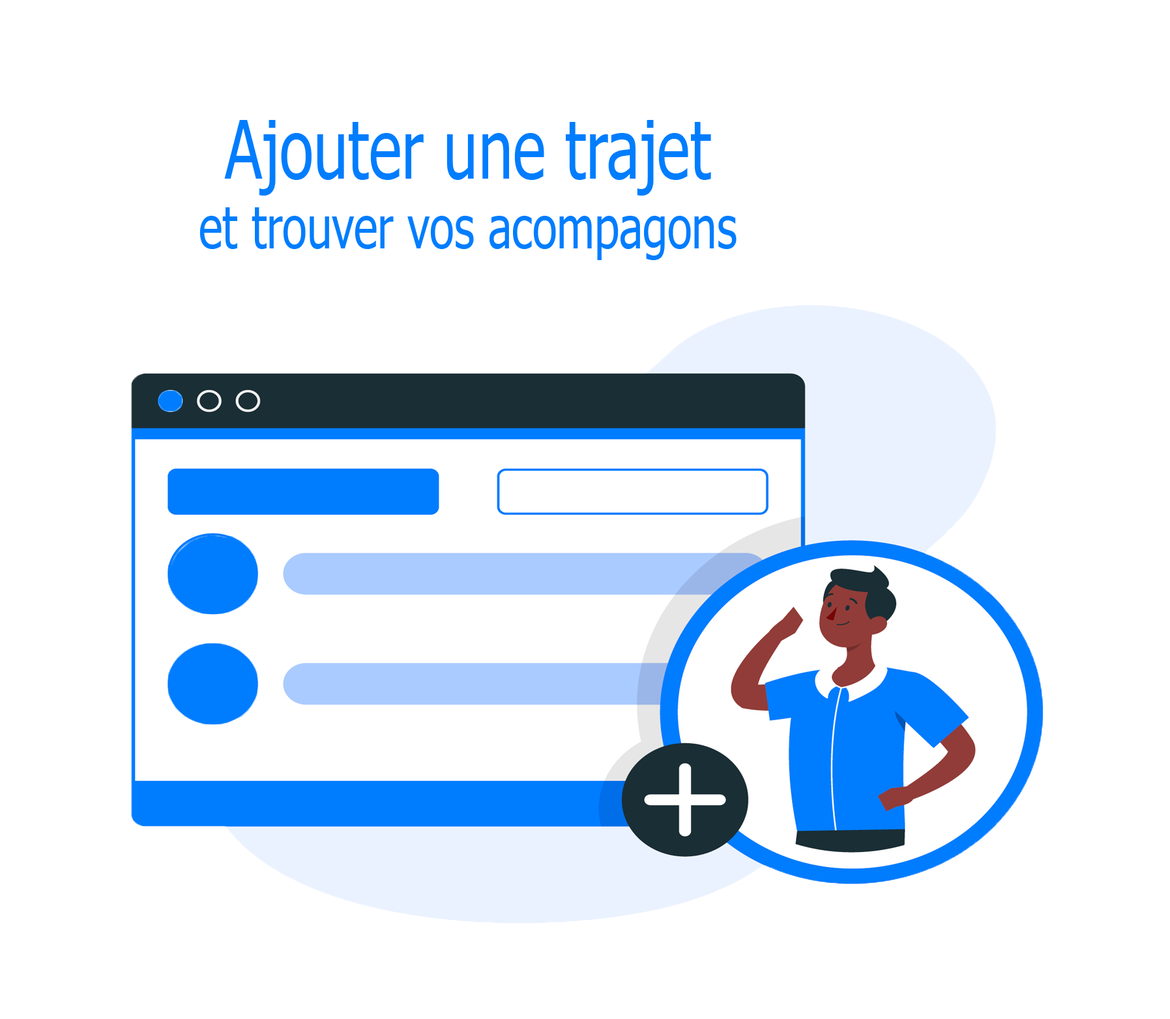
<style>
.page{position:relative;width:1170px;height:1019px;background:#ffffff}
.page>*{position:absolute;margin:0}
.t1{font:58.2px "Tahoma";color:#007dfe;scale:0.77 1}
.t2{font:80.6px "Tahoma";color:#007dfe;scale:0.77 1}
</style>
<div class="page">
<p class="t1" style="left:199px;top:120px;width:538px;height:140px;text-align:center"><span class="t2">Ajouter une trajet <br></span>et trouver vos acompagons</p>
</div>
